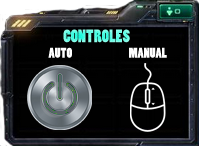
<style>
.page{position:relative;width:199px;height:146px}
.page>*{position:absolute;margin:0}
.t1{font:17.1px "PoplarStd";scale:0.95 1}
.t2{font:13.3px "PoplarStd";color:#ffffff;scale:0.95 1}
</style>
<div class="page">
<p class="t1" style="left:63px;top:29px;width:67px;height:14px">CONTROLES</p>
<p class="t2" style="left:48px;top:47px;width:119px;height:11px">AUTO                                             MANUAL</p>
</div>
